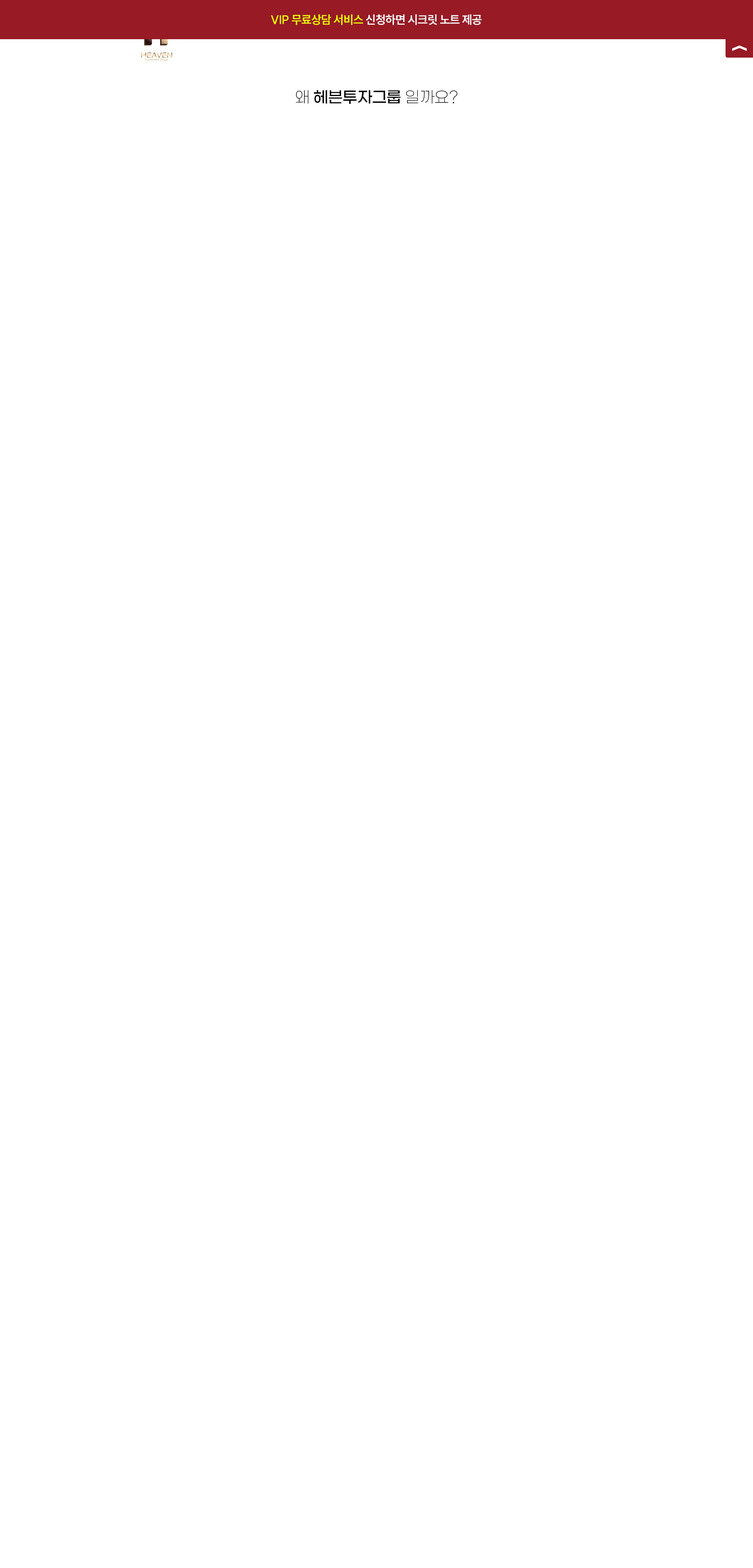
<style>
.page{position:relative;width:753px;height:1568px;background:#ffffff}
.page>*{position:absolute;margin:0}
.t1{font:11.8px "SUIT-Bold";letter-spacing:-0.03em;color:#ffffff}
.t2{font:11.8px "SUIT-Bold";letter-spacing:-0.03em;color:#f0ff00}
.t3{font:15.7px "GmarketSansMedium";letter-spacing:-0.03em;color:#000000}
.t4{font:15.7px "GmarketSansLight";letter-spacing:-0.03em;color:#000000}
</style>
<div class="page">
<p class="t1" style="left:271px;top:14px;width:210px;height:11px"><span class="t2">VIP 무료상담 서비스</span> 신청하면 시크릿 노트 제공</p>
<p class="t3" style="left:296px;top:90px;width:161px;height:14px"><span class="t4">왜 </span>헤븐투자그룹<span class="t4"> 일까요?</span></p>
</div>
